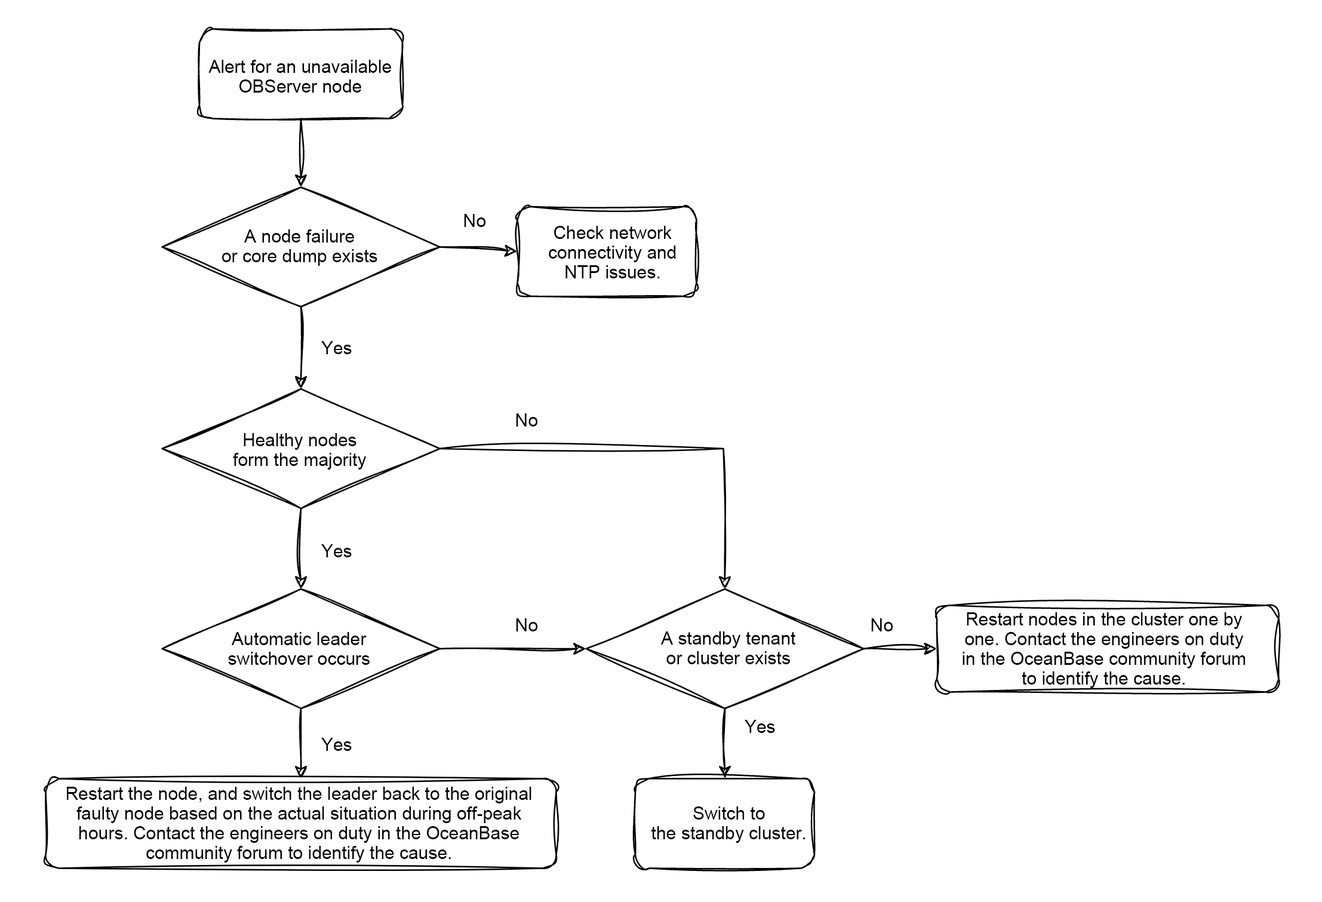
<style>
.page{position:relative;width:1322px;height:902px;background:#ffffff}
.page>*{position:absolute;margin:0}
.t1{font:17.9px/19.7px "ArialMT";color:#000000}
.t2{font:17.9px "ArialMT";color:#000000}
</style>
<div class="page">
<p class="t1" style="left:208px;top:60px;width:183px;height:33px;text-align:center">Alert for an unavailable<br>OBServer node</p>
<p class="t2" style="left:464px;top:214px;width:22px;height:13px">No</p>
<p class="t1" style="left:222px;top:229px;width:155px;height:37px;text-align:center">A node failure<br>or core dump exists</p>
<p class="t1" style="left:549px;top:226px;width:127px;height:52px;text-align:center">Check network<br>connectivity and<br>NTP issues.</p>
<p class="t2" style="left:321px;top:341px;width:31px;height:13px">Yes</p>
<p class="t2" style="left:516px;top:413px;width:22px;height:13px">No</p>
<p class="t1" style="left:233px;top:433px;width:134px;height:36px;text-align:center">Healthy nodes<br>form the majority</p>
<p class="t2" style="left:321px;top:544px;width:31px;height:13px">Yes</p>
<p class="t1" style="left:963px;top:612px;width:283px;height:76px;text-align:center">Restart nodes in the cluster one by one. Contact the engineers on duty in the OceanBase community forum to identify the cause.</p>
<p class="t2" style="left:516px;top:618px;width:22px;height:13px">No</p>
<p class="t2" style="left:871px;top:618px;width:22px;height:13px">No</p>
<p class="t1" style="left:228px;top:632px;width:142px;height:33px;text-align:center">Automatic leader<br>switchover occurs</p>
<p class="t1" style="left:661px;top:631px;width:135px;height:33px;text-align:center">A standby tenant<br>or cluster exists</p>
<p class="t2" style="left:745px;top:720px;width:30px;height:13px">Yes</p>
<p class="t2" style="left:321px;top:738px;width:31px;height:13px">Yes</p>
<p class="t1" style="left:67px;top:787px;width:465px;height:75px;text-align:center">Restart the node, and switch the leader back to the original faulty node based on the actual situation during off-peak hours. Contact the engineers on duty in the OceanBase community forum to identify the cause.</p>
<p class="t1" style="left:652px;top:806px;width:154px;height:37px;text-align:center">Switch to<br>the standby cluster.</p>
</div>
